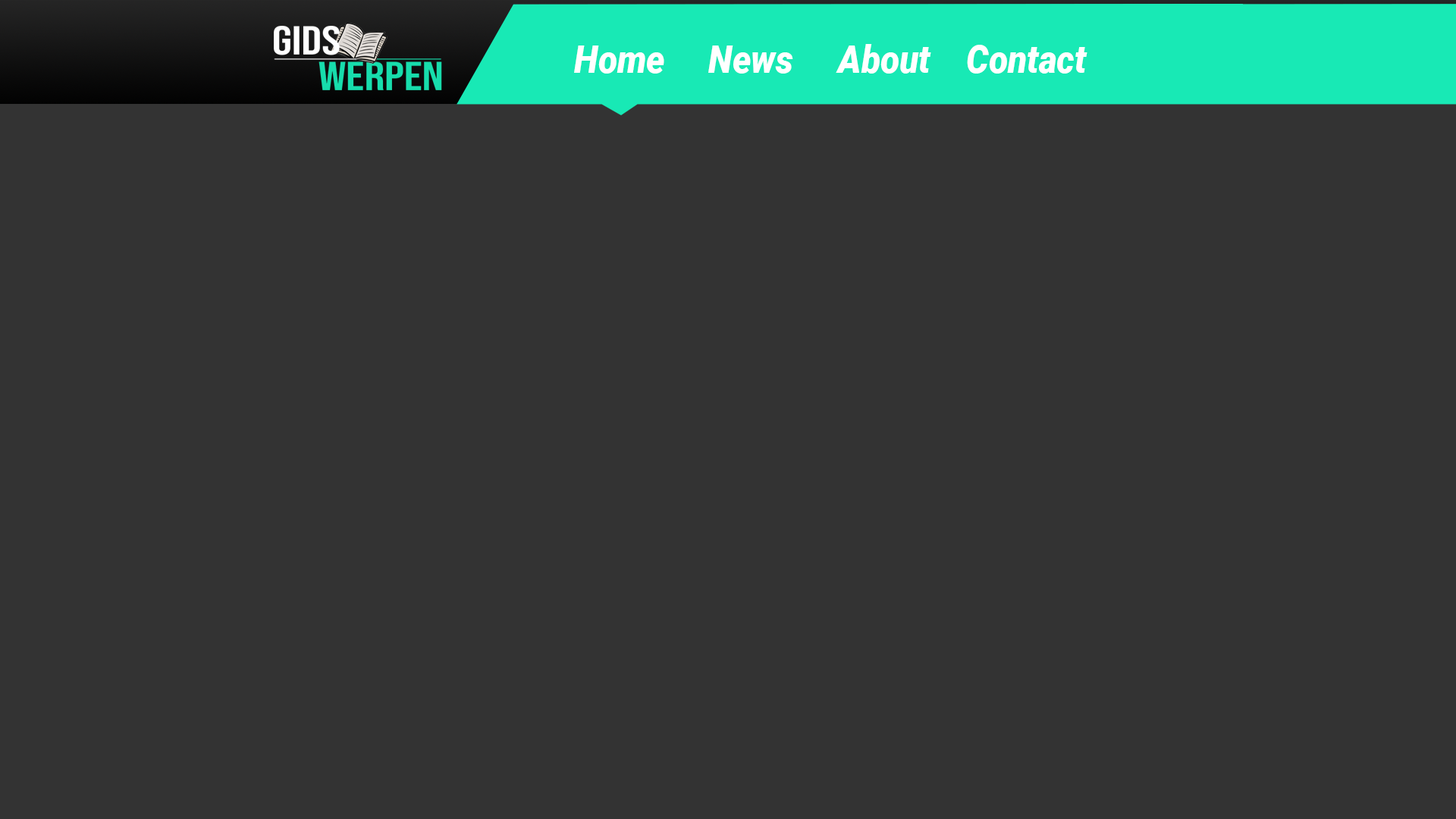
<style>
.page{position:relative;width:1456px;height:819px;background:#333333}
.page>*{position:absolute;margin:0}
.t1{font:38.8px "Roboto-BlackItalic";color:#ffffff;scale:0.9 1}
</style>
<div class="page">
<p class="t1" style="left:574px;top:45px;width:90px;height:29px">Home</p>
<p class="t1" style="left:708px;top:45px;width:85px;height:29px">News</p>
<p class="t1" style="left:836px;top:44px;width:95px;height:30px">About</p>
<p class="t1" style="left:967px;top:45px;width:120px;height:29px">Contact</p>
</div>
